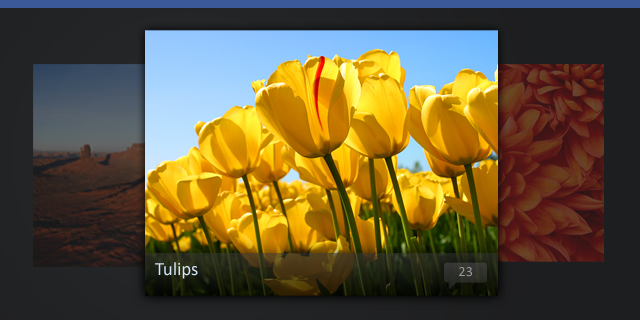
<style>
.page{position:relative;width:640px;height:320px}
.page>*{position:absolute;margin:0}
.t1{font:18.7px "Calibri";color:#d6e5ff}
.t2{font:14px "Calibri";color:#999999}
</style>
<div class="page">
<p class="t1" style="left:155px;top:262px;width:43px;height:17px">Tulips</p>
<p class="t2" style="left:459px;top:267px;width:13px;height:10px">23</p>
</div>
